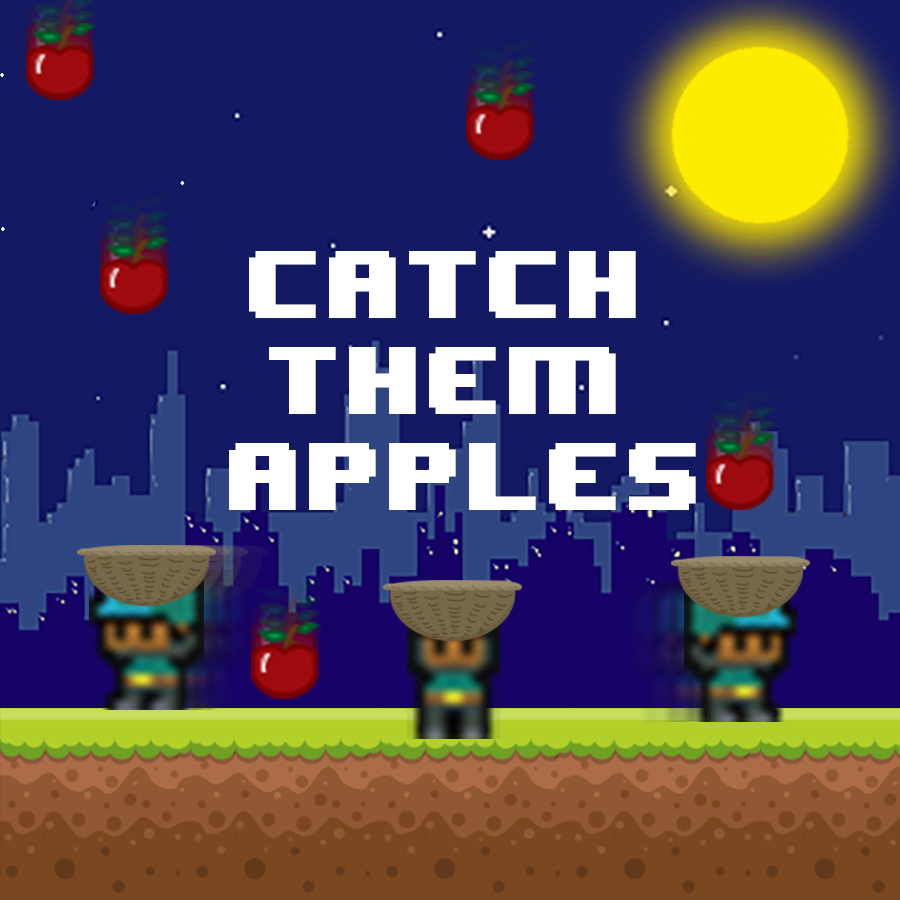
<style>
.page{position:relative;width:900px;height:900px;background:#131963}
.page>*{position:absolute;margin:0}
.t1{font:80px "8BITWONDERNominal";color:#ffffff}
</style>
<div class="page">
<p class="t1" style="left:229px;top:251px;width:467px;height:259px;text-align:center">catch <br>Them <br>Apples</p>
</div>
